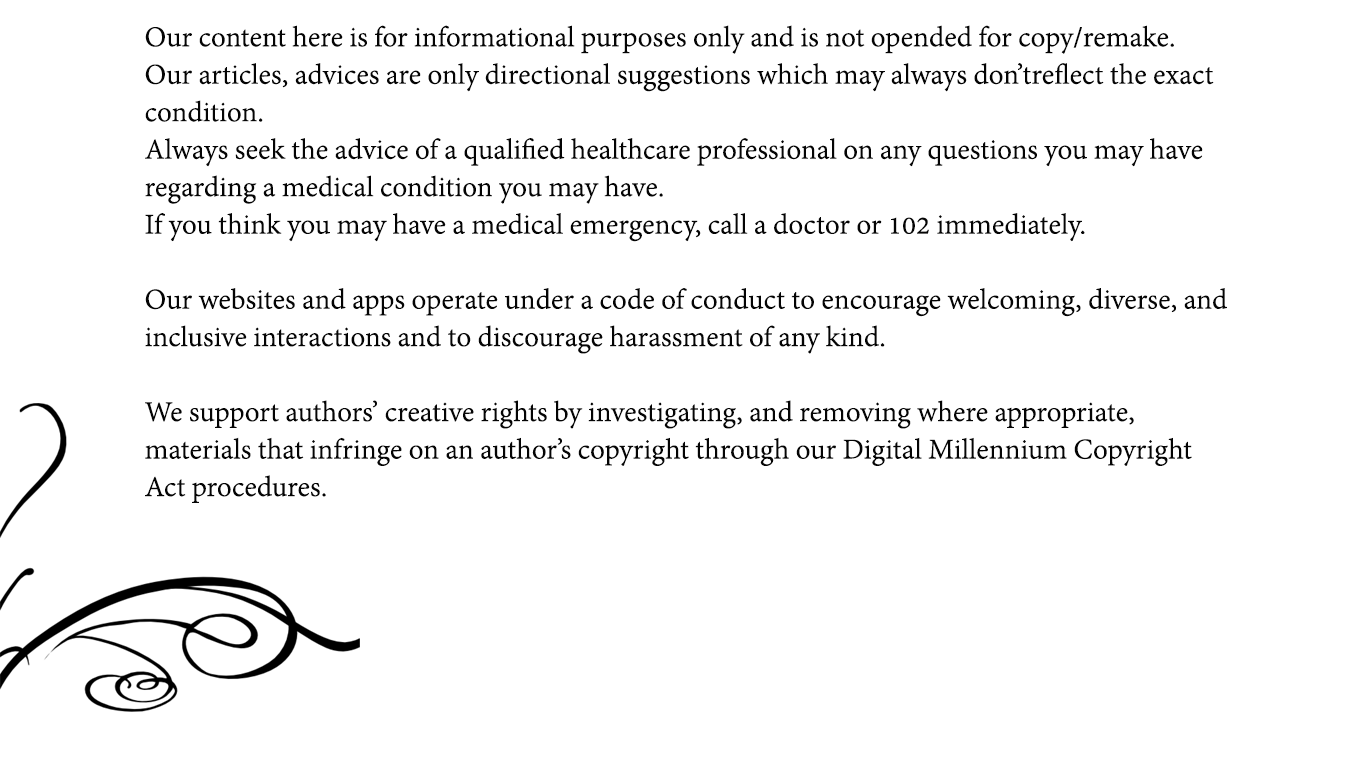
<style>
.page{position:relative;width:1366px;height:768px;background:#ffffff}
.page>*{position:absolute;margin:0}
.t1{font:31.2px "AdobeDevanagari-Regular";color:#040404}
</style>
<div class="page">
<p class="t1" style="left:145px;top:25px;width:1082px;height:478px">Our content here is for informational purposes only and is not opended for copy/remake.<br>Our articles, advices are only directional suggestions which may always don’treflect the exact condition.<br>Always seek the advice of a qualified healthcare professional on any questions you may have regarding a medical condition you may have. <br>If you think you may have a medical emergency, call a doctor or 102 immediately.<br><br>Our websites and apps operate under a code of conduct to encourage welcoming, diverse, and inclusive interactions and to discourage harassment of any kind.<br><br>We support authors’ creative rights by investigating, and removing where appropriate, materials that infringe on an author’s copyright through our Digital Millennium Copyright Act procedures.</p>
</div>
